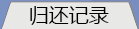
<style>
.page{position:relative;width:139px;height:29px;background:#e8e8e7}
.page>*{position:absolute;margin:0}
.t1{font:20px "MicrosoftYaHei";color:#000000}
</style>
<div class="page">
<p class="t1" style="left:30px;top:6px;width:79px;height:19px">归还记录</p>
</div>
